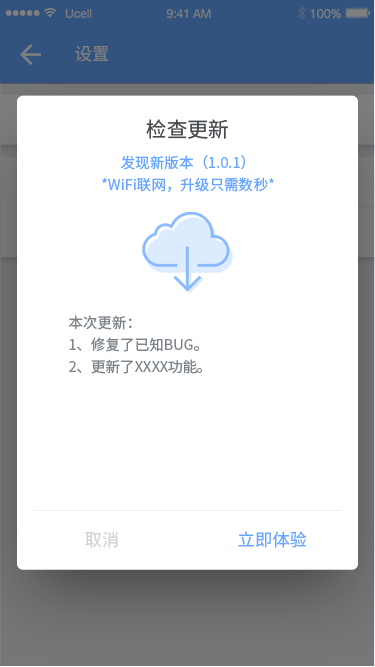
<style>
.page{position:relative;width:375px;height:667px;background:#ffffff}
.page>*{position:absolute;margin:0}
.t1{font:17.3px "NotoSansHans-Regular";color:#7f7f7f}
.t2{font:20.8px "NotoSansHans-Regular";color:#474a4f}
.t3{font:14.6px/21.9px "NotoSansHans-Regular";color:#66a6ff}
.t4{font:14.6px/21.9px "NotoSansHans-Regular";color:#7e848c}
.t5{font:17.3px "NotoSansHans-Regular";color:#d2d2d2}
.t6{font:17.3px "NotoSansHans-Regular";color:#66a6ff}
</style>
<div class="page">
<p class="t1" style="left:75px;top:45px;width:34px;height:17px">设置</p>
<p class="t2" style="left:146px;top:119px;width:82px;height:20px">检查更新</p>
<p class="t3" style="left:102px;top:155px;width:172px;height:37px;text-align:center">发现新版本（1.0.1）<br>*WiFi联网，升级只需数秒*<br>*</p>
<p class="t4" style="left:69px;top:315px;width:133px;height:59px">本次更新：<br>1、修复了已知BUG。<br>2、更新了XXXX功能。</p>
<p class="t5" style="left:85px;top:531px;width:33px;height:17px">取消</p>
<p class="t6" style="left:238px;top:531px;width:69px;height:17px">立即体验</p>
</div>
